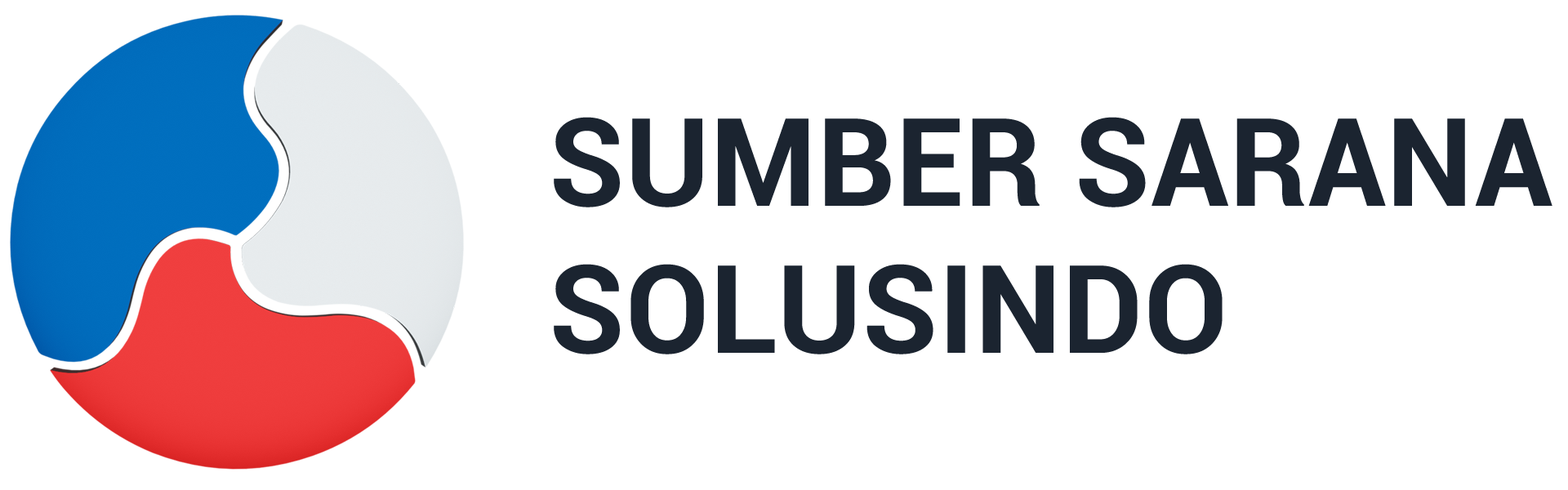
<style>
.page{position:relative;width:1568px;height:490px;background:#ffffff}
.page>*{position:absolute;margin:0}
.t1{font:122.5px "Roboto-Bold";letter-spacing:0.005em;color:#1b2430}
</style>
<div class="page">
<p class="t1" style="left:554px;top:117px;width:998px;height:237px">SUMBER SARANA <br>SOLUSINDO</p>
</div>
